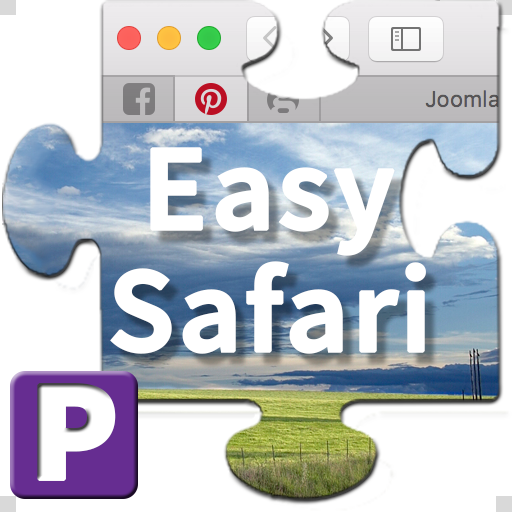
<style>
.page{position:relative;width:512px;height:512px;background:#ffffff}
.page>*{position:absolute;margin:0}
.t1{font:122px "SourceSansPro-Semibold";color:#ffffff;font-weight:bold}
.t2{font:144px "SourceSansPro-Black";color:#ffffff;text-transform:uppercase;font-weight:bold}
</style>
<div class="page">
<p class="t1" style="left:150px;top:147px;width:245px;height:109px">Easy</p>
<p class="t1" style="left:110px;top:261px;width:316px;height:93px">Safari</p>
<p class="t2" style="left:37px;top:383px;width:79px;height:98px">P</p>
</div>
